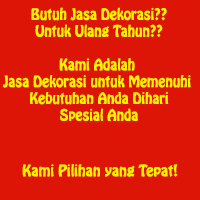
<style>
.page{position:relative;width:200px;height:200px;background:#dd1506}
.page>*{position:absolute;margin:0}
.t1{font:14px "HoboStd";color:#faf107;scale:0.96 1}
.t2{font:14px "HoboStd";color:#fff000}
</style>
<div class="page">
<p class="t1" style="left:2px;top:7px;width:189px;height:114px;text-align:center">Butuh Jasa Dekorasi??<br>Untuk Ulang Tahun??<br><br>Kami Adalah <br>Jasa Dekorasi untuk Memenuhi <br>Kebutuhan Anda Dihari<br>Spesial Anda</p>
<p class="t2" style="left:22px;top:164px;width:156px;height:13px">Kami Pilihan yang Tepat!</p>
</div>
